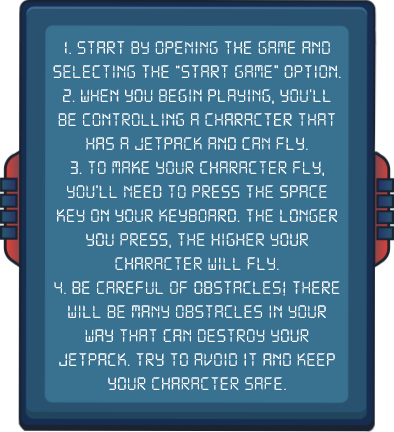
<style>
.page{position:relative;width:394px;height:432px;background:#397191}
.page>*{position:absolute;margin:0}
.t1{font:20px "DS-Digital";color:#ffffff}
</style>
<div class="page">
<p class="t1" style="left:53px;top:41px;width:288px;height:349px;text-align:center">1. Start by opening the game and selecting the “Start Game” option.<br>2. When you begin playing, you'll be controlling a character that has a jetpack and can fly.<br>3. To make your character fly, you'll need to press the space key on your keyboard. The longer you press, the higher your character will fly.<br>4. Be careful of obstacles! There will be many obstacles in your way that can destroy your jetpack. Try to avoid it and keep your character safe.</p>
</div>
